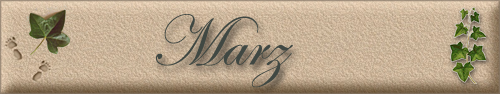
<style>
.page{position:relative;width:500px;height:94px}
.page>*{position:absolute;margin:0}
.t1{font:72px "EdwardianScriptITC";color:#404843}
.t2{font:72px "EdwardianScriptITC";color:#000000}
</style>
<div class="page">
<p class="t1" style="left:156px;top:14px;width:137px;height:74px"><span class="t2">                          </span>Marz</p>
</div>
